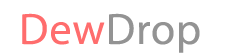
<style>
.page{position:relative;width:233px;height:55px;background:#ffffff}
.page>*{position:absolute;margin:0}
.t1{font:44.2px "MyriadPro-Regular";letter-spacing:0.02em;color:#939393}
.t2{font:44.2px "MyriadPro-Regular";letter-spacing:0.02em;color:#ff6d6d}
</style>
<div class="page">
<p class="t1" style="left:22px;top:13px;width:178px;height:40px"><span class="t2">Dew</span>Drop</p>
</div>
